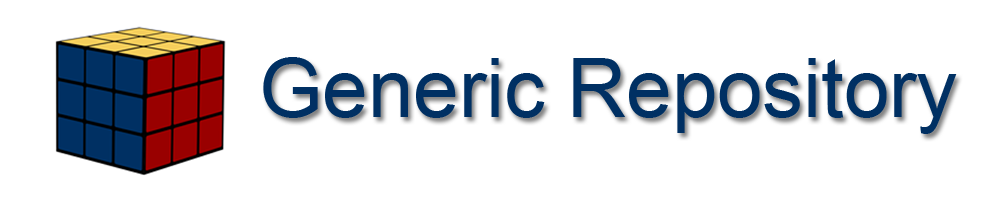
<style>
.page{position:relative;width:1000px;height:200px;background:#ffffff}
.page>*{position:absolute;margin:0}
.t1{font:81.6px "ArialMT";color:#003063}
</style>
<div class="page">
<p class="t1" style="left:263px;top:57px;width:694px;height:77px">Generic Repository</p>
</div>
